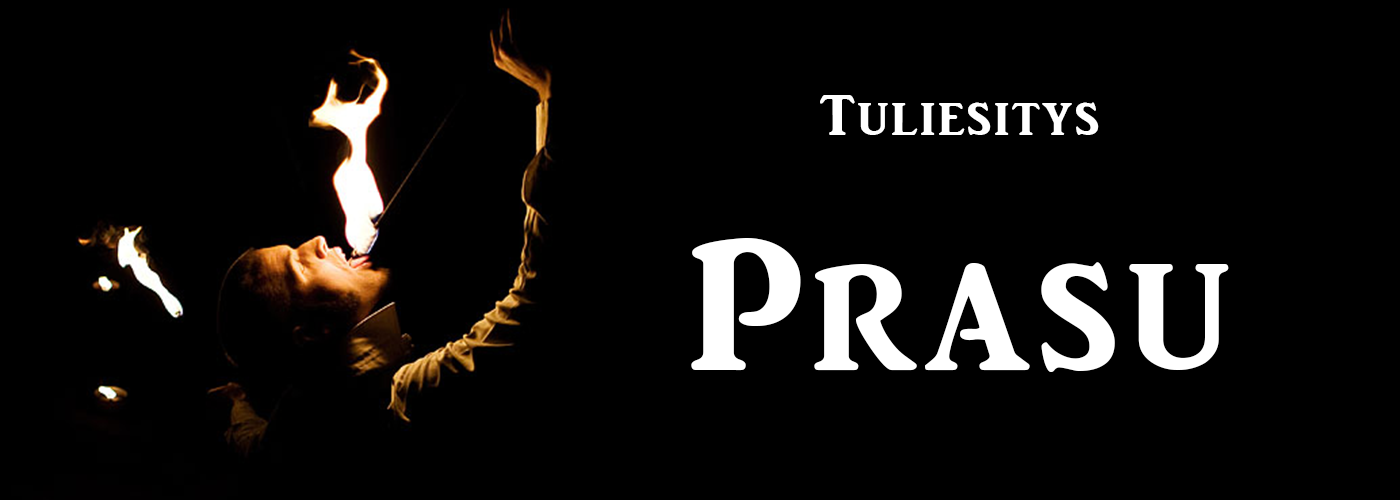
<style>
.page{position:relative;width:1400px;height:500px;background:#000000}
.page>*{position:absolute;margin:0}
.t1{font:59.3px "ARJULIAN";letter-spacing:0.04em;color:#ffffff}
.t2{font:196.1px "ARJULIAN";letter-spacing:0.04em;color:#ffffff}
</style>
<div class="page">
<p class="t1" style="left:691px;top:95px;width:538px;height:277px;text-align:center">Tuliesitys<br><span class="t2">Prasu</span></p>
</div>
